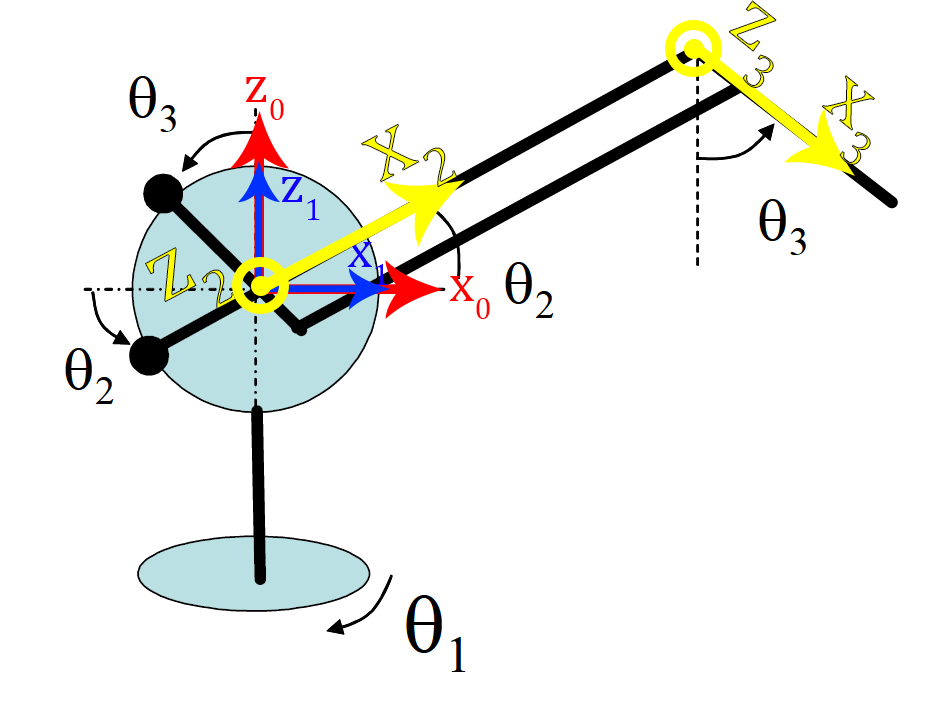
<style>
.page{position:relative;width:940px;height:725px;background:#ffffff}
.page>*{position:absolute;margin:0}
.t1{font:85px "CambriaMath"}
.t2{font:53.3px "CambriaMath";color:#ff0000}
.t3{font:93.9px "CambriaMath"}
.t4{font:53.3px "CambriaMath";color:#1200ff}
</style>
<div class="page">
<p class="t1" style="left:728px;top:0px;width:49px;height:88px;rotate:39deg">z3</p>
<p class="t2" style="left:246px;top:77px;width:38px;height:43px">z0</p>
<p class="t1" style="left:821px;top:75px;width:54px;height:90px;rotate:39deg">x3</p>
<p class="t3" style="left:361px;top:123px;width:97px;height:65px;rotate:-28deg">x2</p>
<p class="t4" style="left:282px;top:177px;width:38px;height:43px">z1</p>
<p class="t4" style="left:347px;top:242px;width:41px;height:43px">x1</p>
<p class="t3" style="left:145px;top:247px;width:92px;height:63px;rotate:-28deg">z2</p>
<p class="t2" style="left:449px;top:276px;width:41px;height:43px">x0</p>
</div>
